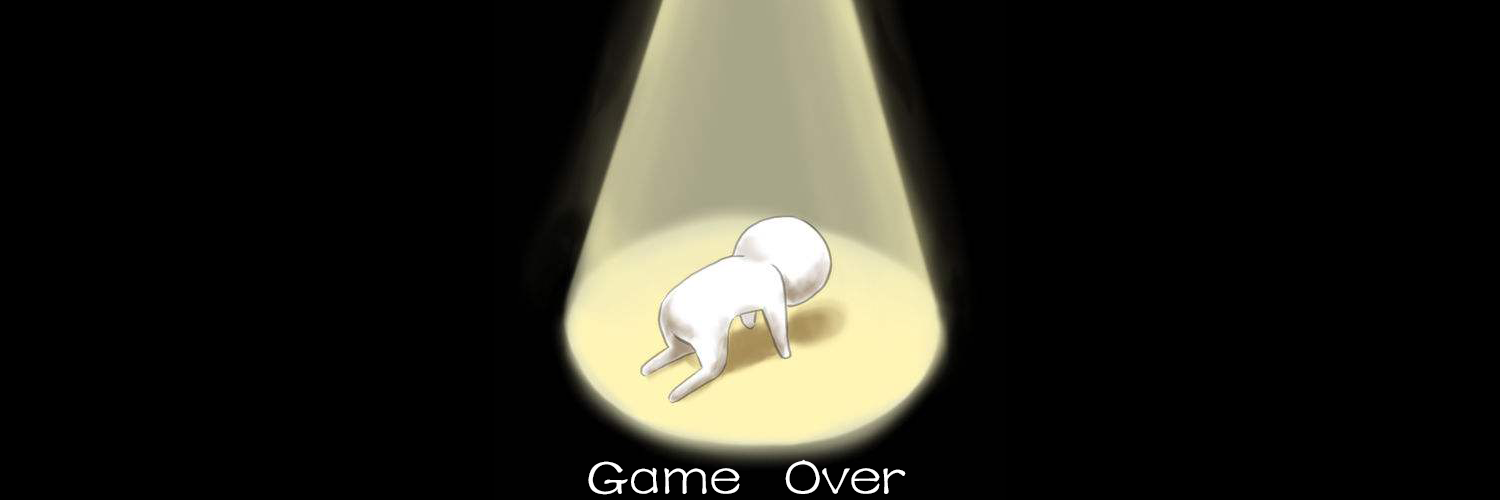
<style>
.page{position:relative;width:1500px;height:500px;background:#000000}
.page>*{position:absolute;margin:0}
.t1{font:58.3px "FZSTK--GBK1-0";color:#fefefe}
</style>
<div class="page">
<p class="t1" style="left:588px;top:459px;width:318px;height:36px">Game   Over</p>
</div>
